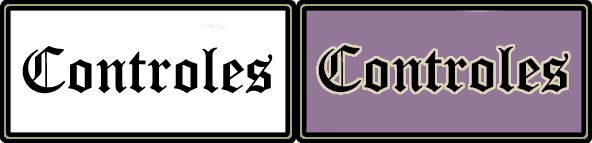
<style>
.page{position:relative;width:592px;height:143px;background:#ffffff}
.page>*{position:absolute;margin:0}
.t1{font:64.8px "OldEnglishTextMT";color:#000000}
</style>
<div class="page">
<p class="t1" style="left:22px;top:46px;width:251px;height:48px">Controles</p>
<p class="t1" style="left:318px;top:45px;width:251px;height:48px">Controles</p>
</div>
